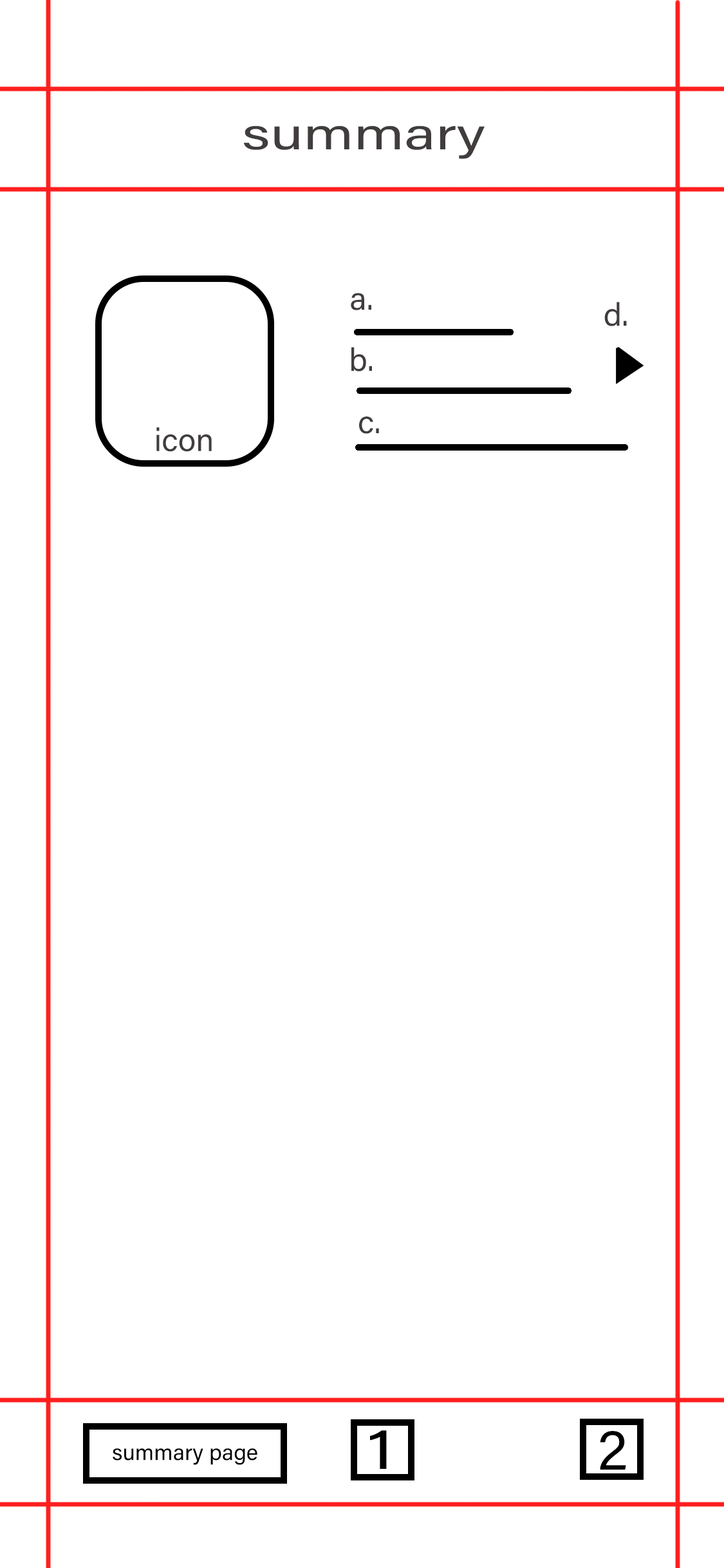
<style>
.page{position:relative;width:724px;height:1568px;background:#ffffff}
.page>*{position:absolute;margin:0}
.t1{font:45.1px "AcuminConcept-Regular";color:#413d3d;scale:1.32 1}
.t2{font:32.2px "AcuminConcept-Regular";color:#413d3d}
.t3{font:57.8px "AcuminConcept-Regular";color:#000000;scale:1.24 1}
.t4{font:57.8px "AcuminConcept-Regular";color:#000000}
.t5{font:22.4px "AcuminConcept-Regular";color:#000000}
</style>
<div class="page">
<p class="t1" style="left:243px;top:126px;width:242px;height:33px">summary</p>
<p class="t2" style="left:351px;top:293px;width:20px;height:17px">a.</p>
<p class="t2" style="left:604px;top:302px;width:23px;height:24px">d.</p>
<p class="t2" style="left:351px;top:347px;width:21px;height:24px">b.</p>
<p class="t2" style="left:359px;top:416px;width:20px;height:18px">c.</p>
<p class="t2" style="left:156px;top:427px;width:56px;height:25px">icon</p>
<p class="t3" style="left:370px;top:1430px;width:17px;height:39px">1</p>
<p class="t4" style="left:600px;top:1431px;width:26px;height:39px">2</p>
<p class="t5" style="left:113px;top:1448px;width:144px;height:17px">summary page</p>
</div>
